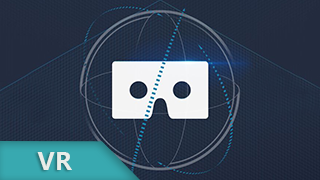
<style>
.page{position:relative;width:320px;height:180px}
.page>*{position:absolute;margin:0}
.t1{font:24px "MicrosoftYaHei-Bold";color:#eaede9}
</style>
<div class="page">
<p class="t1" style="left:37px;top:152px;width:35px;height:18px">VR</p>
</div>
